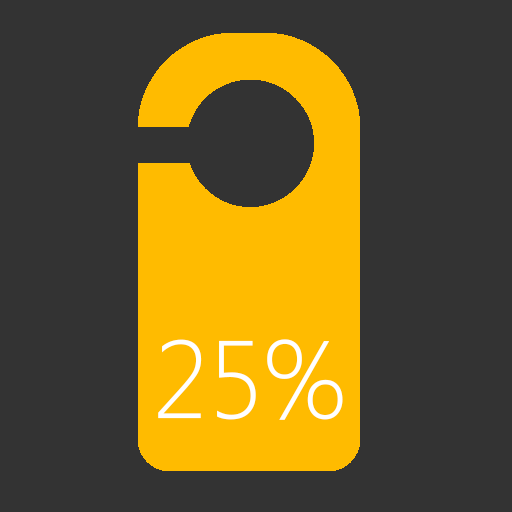
<style>
.page{position:relative;width:512px;height:512px;background:#333333}
.page>*{position:absolute;margin:0}
.t1{font:109.6px "SegoeUI-Light";color:#ffffff;scale:0.97 1}
</style>
<div class="page">
<p class="t1" style="left:158px;top:339px;width:185px;height:81px">25%</p>
</div>
